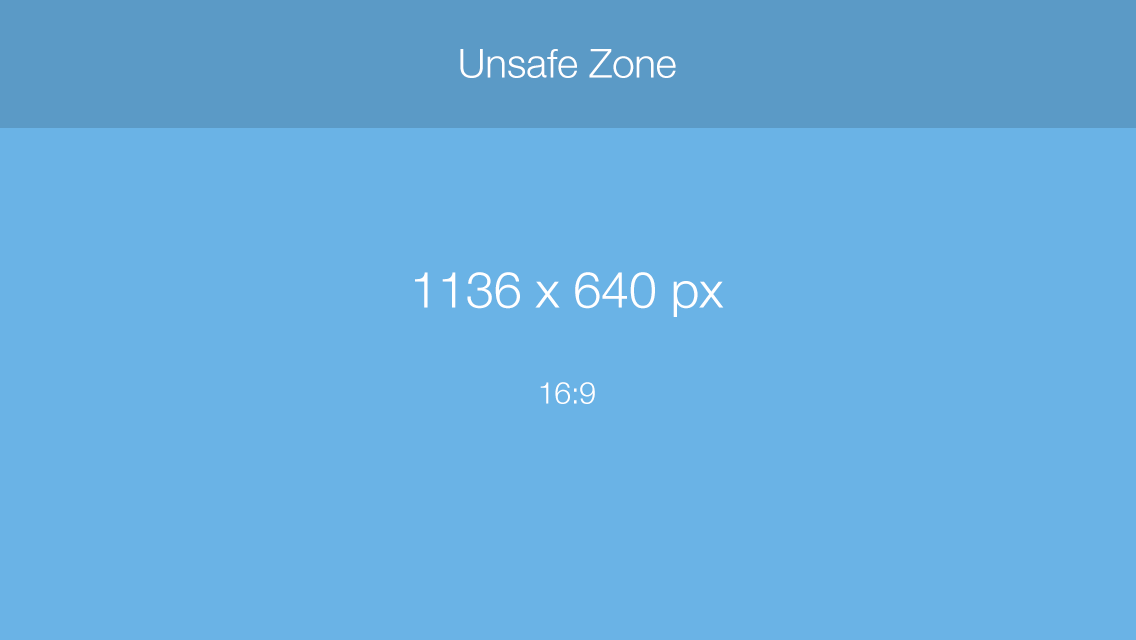
<style>
.page{position:relative;width:1136px;height:640px;background:#6ab3e6}
.page>*{position:absolute;margin:0}
.t1{font:40px "HelveticaNeue-Light";color:#ffffff}
.t2{font:50px "HelveticaNeue-Light";color:#ffffff}
.t3{font:30px "HelveticaNeue-Light";color:#ffffff}
</style>
<div class="page">
<p class="t1" style="left:460px;top:49px;width:216px;height:29px">Unsafe Zone</p>
<p class="t2" style="left:415px;top:272px;width:309px;height:132px;text-align:center">1136 x 640 px<br><br><span class="t3">16:9</span></p>
</div>
